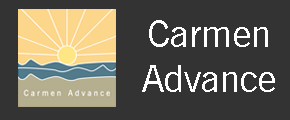
<style>
.page{position:relative;width:290px;height:120px;background:#333333}
.page>*{position:absolute;margin:0}
.t1{font:37.5px "NewsGothicBT-Roman";color:#ffffff}
</style>
<div class="page">
<p class="t1" style="left:142px;top:20px;width:133px;height:72px;text-align:center">Carmen<br>Advance</p>
</div>
